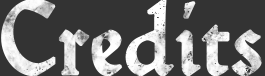
<style>
.page{position:relative;width:265px;height:76px;background:#333333}
.page>*{position:absolute;margin:0}
.t1{font:104.2px "Hamlet-Tertia18";color:#ececec;font-weight:bold}
</style>
<div class="page">
<p class="t1" style="left:1px;top:0px;width:261px;height:77px">Credits</p>
</div>
